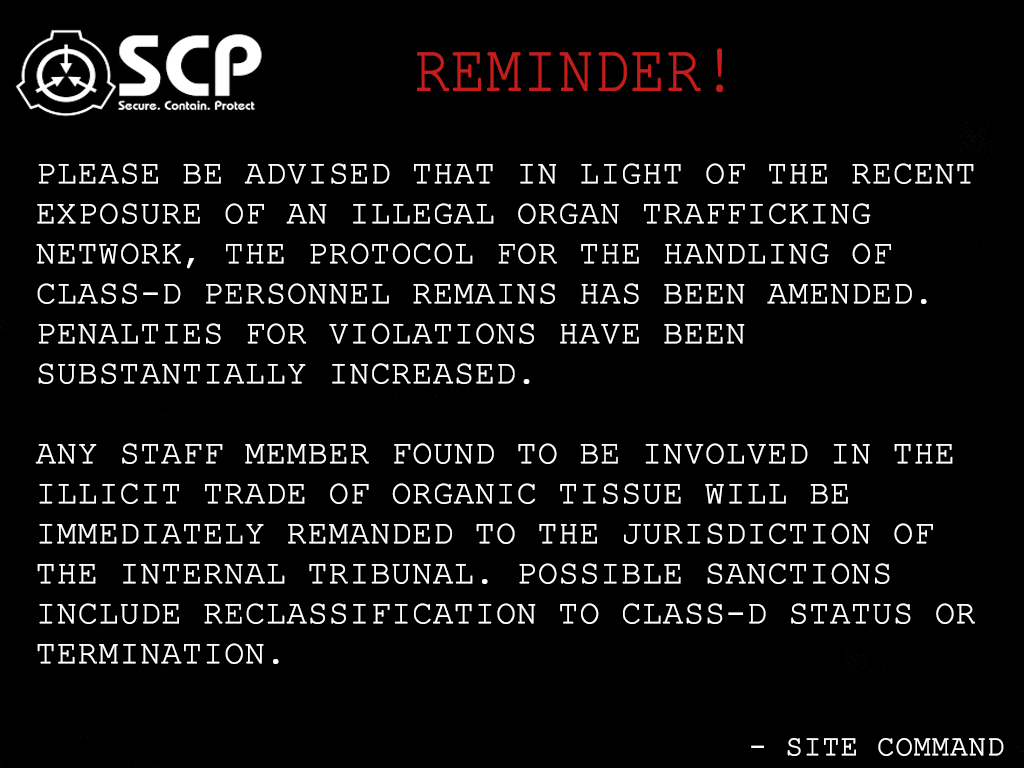
<style>
.page{position:relative;width:1024px;height:768px;background:#000000}
.page>*{position:absolute;margin:0}
.t1{font:66.7px "CourierNewPSMT";color:#c61c1c;text-transform:uppercase;font-weight:bold;scale:0.86 1}
.t2{font:33.3px "CourierNewPSMT";color:#ffffff;text-transform:uppercase;font-weight:bold}
.t3{font:29.2px "CourierNewPSMT";color:#ffffff;text-transform:uppercase;font-weight:bold}
</style>
<div class="page">
<p class="t1" style="left:417px;top:48px;width:306px;height:44px">Reminder!</p>
<p class="t2" style="left:35px;top:163px;width:940px;height:501px;text-align:justify"><span class="t3"><br></span>Please be advised that in light of the recent exposure of an illegal organ trafficking network, the Protocol for the Handling of Class-D Personnel Remains has been amended. Penalties for violations have been substantially increased.<br><br>Any staff member found to be involved in the illicit trade of organic tissue will be immediately remanded to the jurisdiction of the Internal Tribunal. Possible sanctions include reclassification to Class-D status or termination.</p>
<p class="t3" style="left:751px;top:738px;width:253px;height:18px">- Site command</p>
</div>
